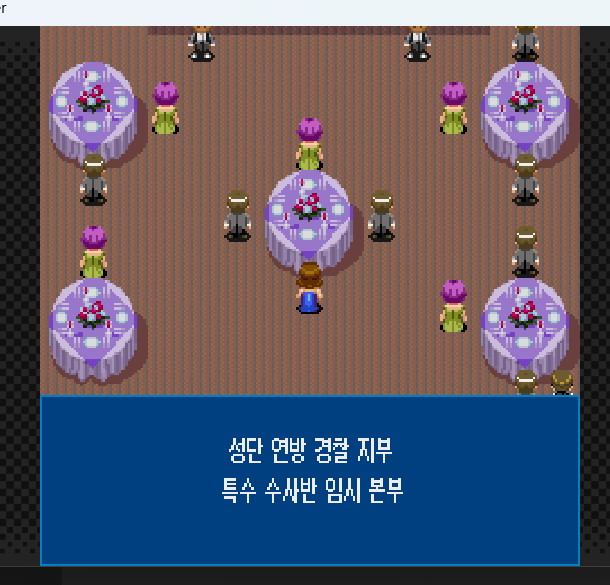
<style>
.page{position:relative;width:610px;height:585px;background:#004080}
.page>*{position:absolute;margin:0}
.t1{font:26.7px/40px "Galmuri11-Condensed";color:#ededed}
</style>
<div class="page">
<p class="t1" style="left:222px;top:438px;width:181px;height:65px">성단 연방 경찰 지부<br>　　　　　　 특수 수사반 임시 본부</p>
</div>
